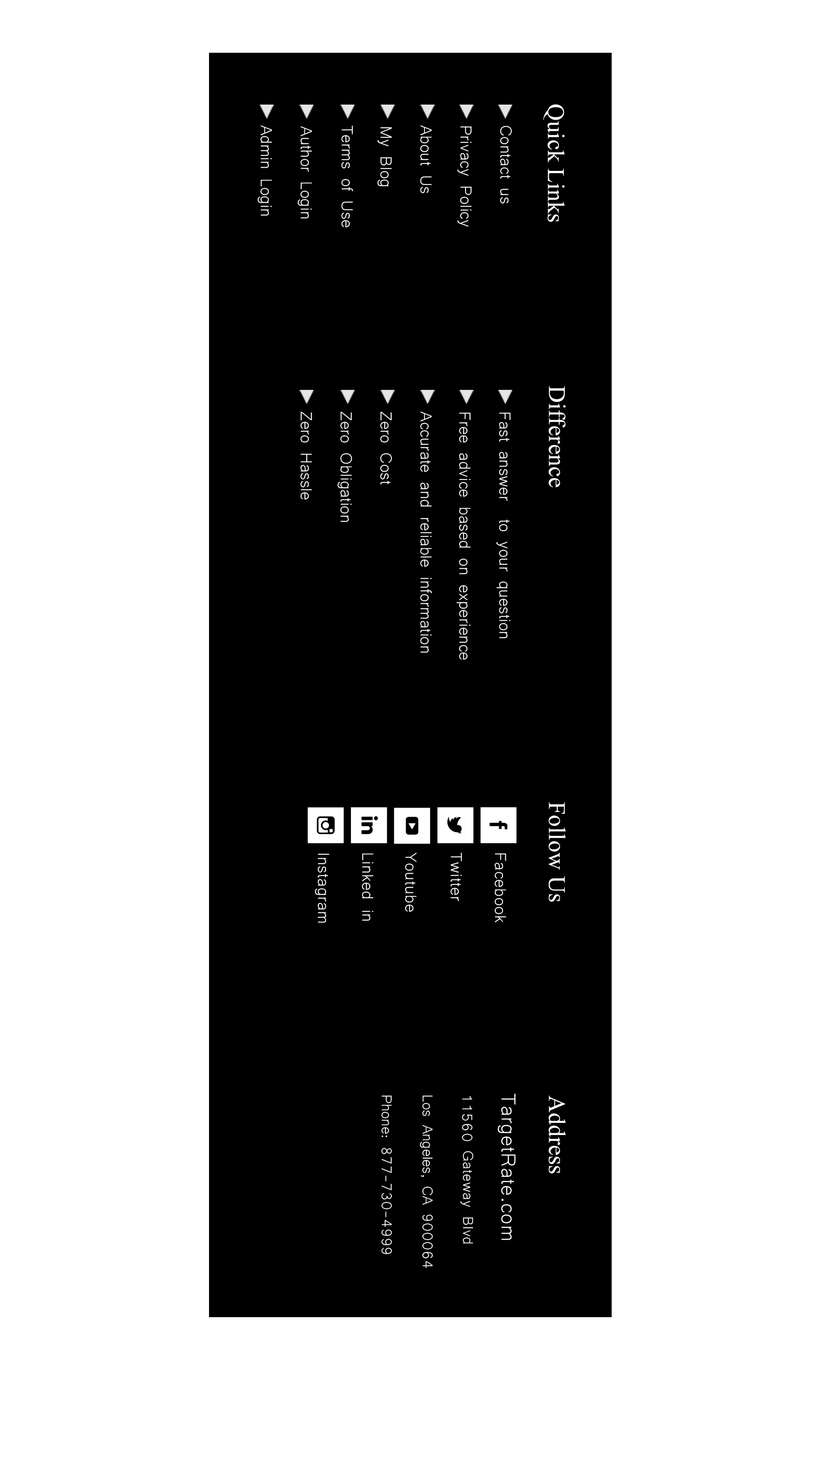
<style>
.page{position:relative;width:816px;height:1461px;background:#ffffff}
.page>*{position:absolute;margin:0}
.t1{font:23.8px "MongolianBaiti";letter-spacing:0.005em;color:#ffffff}
.t2{font:20.5px "Microsoft-Yi-Baiti";letter-spacing:0.005em;color:#ffffff}
.t3{font:55.1px/43.2px "socialtype";letter-spacing:0.02em;color:#ffffff}
.t4{font:55.1px/43.2px "socialtype";letter-spacing:0.005em;color:#ffffff}
.t5{font:20.5px "Microsoft-Yi-Baiti";letter-spacing:0.02em;color:#ffffff}
.t6{font:20.5px "Microsoft-Yi-Baiti";letter-spacing:0.025em;color:#ffffff}
.t7{font:18.4px "Microsoft-Yi-Baiti";letter-spacing:-0.005em;color:#ffffff}
.t8{font:25.9px/39.2px "Microsoft-Yi-Baiti";letter-spacing:0.025em;color:#ffffff}
.t9{font:18.4px/39.2px "Microsoft-Yi-Baiti";letter-spacing:0.025em;color:#ffffff}
.t10{font:18.4px "Microsoft-Yi-Baiti";letter-spacing:0.025em;color:#ffffff}
</style>
<div class="page">
<p class="t1" style="left:543px;top:104px;width:22px;height:118px;rotate:90deg">Quick Links</p>
<p class="t2" style="left:258px;top:125px;width:14px;height:91px;rotate:90deg">Admin Login</p>
<p class="t2" style="left:341px;top:126px;width:12px;height:101px;rotate:90deg">Terms of Use</p>
<p class="t2" style="left:420px;top:125px;width:12px;height:68px;rotate:90deg">About Us</p>
<p class="t2" style="left:500px;top:126px;width:12px;height:78px;rotate:90deg">Contact us</p>
<p class="t2" style="left:298px;top:126px;width:14px;height:92px;rotate:90deg">Author Login</p>
<p class="t2" style="left:378px;top:127px;width:14px;height:59px;rotate:90deg">My Blog</p>
<p class="t2" style="left:457px;top:126px;width:15px;height:101px;rotate:90deg">Privacy Policy</p>
<p class="t1" style="left:549px;top:386px;width:17px;height:101px;rotate:90deg">Difference</p>
<p class="t2" style="left:301px;top:411px;width:11px;height:88px;rotate:90deg">Zero Hassle</p>
<p class="t2" style="left:337px;top:411px;width:15px;height:111px;rotate:90deg">Zero Obligation</p>
<p class="t2" style="left:380px;top:411px;width:12px;height:74px;rotate:90deg">Zero Cost</p>
<p class="t2" style="left:420px;top:411px;width:12px;height:242px;rotate:90deg">Accurate and reliable information</p>
<p class="t2" style="left:457px;top:412px;width:14px;height:248px;rotate:90deg">Free advice based on experience</p>
<p class="t2" style="left:496px;top:412px;width:15px;height:226px;rotate:90deg">Fast answer  to your question</p>
<p class="t3" style="left:308px;top:807px;width:209px;height:36px;text-align:right;rotate:90deg">b<br>a<br><span class="t4">f<br></span>d<br>v</p>
<p class="t1" style="left:549px;top:802px;width:17px;height:99px;rotate:90deg">Follow Us</p>
<p class="t5" style="left:315px;top:853px;width:15px;height:69px;rotate:90deg">Instagram</p>
<p class="t5" style="left:362px;top:853px;width:12px;height:68px;rotate:90deg">Linked in</p>
<p class="t6" style="left:405px;top:852px;width:12px;height:60px;rotate:90deg">Youtube</p>
<p class="t6" style="left:450px;top:852px;width:12px;height:49px;rotate:90deg">Twitter</p>
<p class="t6" style="left:495px;top:853px;width:11px;height:69px;rotate:90deg">Facebook</p>
<p class="t7" style="left:381px;top:1095px;width:11px;height:159px;rotate:90deg">Phone: 877-730-4999</p>
<p class="t7" style="left:420px;top:1095px;width:13px;height:173px;rotate:90deg">Los Angeles, CA 900064</p>
<p class="t8" style="left:462px;top:1093px;width:54px;height:147px;text-align:right;rotate:90deg">TargetRate.com<br><span class="t9">11560</span></p>
<p class="t1" style="left:549px;top:1095px;width:17px;height:78px;rotate:90deg">Address</p>
<p class="t10" style="left:460px;top:1151px;width:14px;height:92px;rotate:90deg">Gateway Blvd</p>
</div>
